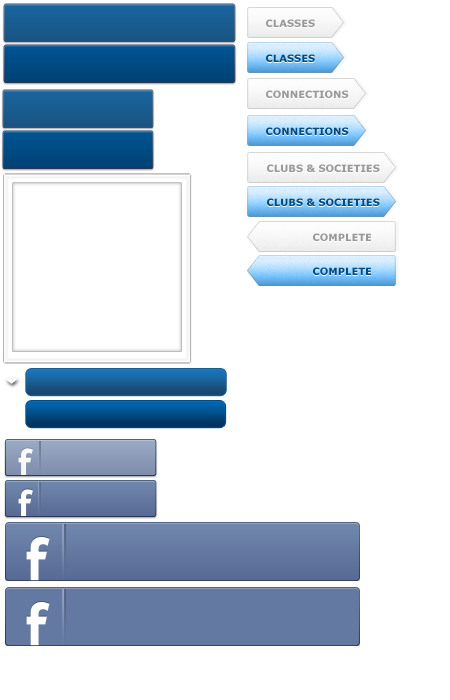
<style>
.page{position:relative;width:450px;height:700px;background:#ffffff}
.page>*{position:absolute;margin:0}
.t1{font:10px "Verdana-Bold";color:#999999}
.t2{font:10px "Verdana-Bold";color:#004b84}
</style>
<div class="page">
<p class="t1" style="left:266px;top:19px;width:49px;height:8px">CLASSES</p>
<p class="t2" style="left:266px;top:54px;width:49px;height:8px">CLASSES</p>
<p class="t1" style="left:266px;top:90px;width:83px;height:8px">CONNECTIONS</p>
<p class="t2" style="left:266px;top:127px;width:83px;height:8px">CONNECTIONS</p>
<p class="t1" style="left:267px;top:164px;width:113px;height:8px">CLUBS &amp; SOCIETIES</p>
<p class="t2" style="left:267px;top:198px;width:113px;height:8px">CLUBS &amp; SOCIETIES</p>
<p class="t1" style="left:313px;top:233px;width:58px;height:8px">COMPLETE</p>
<p class="t2" style="left:313px;top:267px;width:58px;height:8px">COMPLETE</p>
</div>
